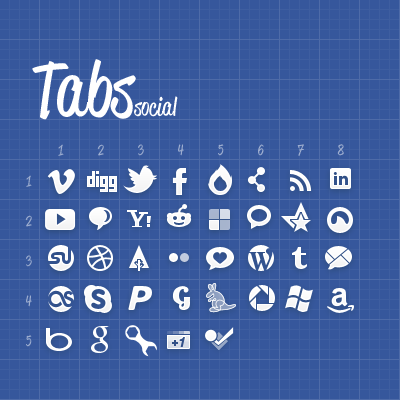
<style>
.page{position:relative;width:400px;height:400px;background:#36579c}
.page>*{position:absolute;margin:0}
.t1{font:75.5px "ReklameScript-RegularDEMO";color:#ffffff}
.t2{font:24.8px "ReklameScript-RegularDEMO";color:#ffffff}
.t3{font:14.8px/40px "ReklameScript-RegularDEMO";color:#9babce}
.t4{font:14.8px/40px "ReklameScript-RegularDEMO";color:#9dadcf}
</style>
<div class="page">
<p class="t1" style="left:32px;top:59px;width:104px;height:61px">Tabs</p>
<p class="t2" style="left:134px;top:96px;width:44px;height:21px">social</p>
<p class="t3" style="left:58px;top:144px;width:286px;height:12px;text-align:center">8<br>7<br>6<br>5<br>4<br>3<br>2<br>1</p>
<p class="t4" style="left:25px;top:175px;width:7px;height:172px;text-align:center">1<br>2<br>3<br>4<br>5</p>
</div>
